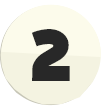
<style>
.page{position:relative;width:101px;height:109px;background:#fcfbeb}
.page>*{position:absolute;margin:0}
.t1{font:72px "MovaviGrotesqueBlack";color:#282828}
</style>
<div class="page">
<p class="t1" style="left:32px;top:29px;width:38px;height:52px">2</p>
</div>
